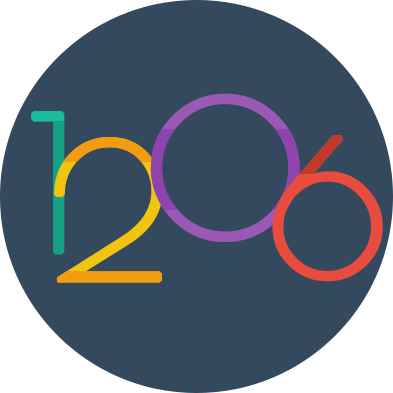
<style>
.page{position:relative;width:393px;height:393px;background:#34495e}
.page>*{position:absolute;margin:0}
.t1{font:185px "PoiretOne-Regular";letter-spacing:-0.075em;color:#9b59b6;font-weight:bold}
.t2{font:185px "PoiretOne-Regular";letter-spacing:-0.075em;color:#16a085;font-weight:bold}
.t3{font:185px "PoiretOne-Regular";letter-spacing:-0.075em;color:#e74c3c;font-weight:bold}
</style>
<div class="page">
<p class="t1" style="left:150px;top:93px;width:150px;height:149px">0</p>
<p class="t2" style="left:31px;top:111px;width:34px;height:144px">1</p>
<p class="t3" style="left:272px;top:135px;width:111px;height:147px">6</p>
</div>
